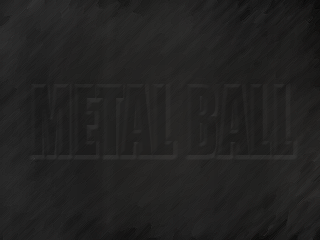
<style>
.page{position:relative;width:320px;height:240px}
.page>*{position:absolute;margin:0}
.t1{font:90px "Impact";color:#212120;scale:0.67 1}
</style>
<div class="page">
<p class="t1" style="left:31px;top:84px;width:263px;height:71px">METAL BALL</p>
</div>
